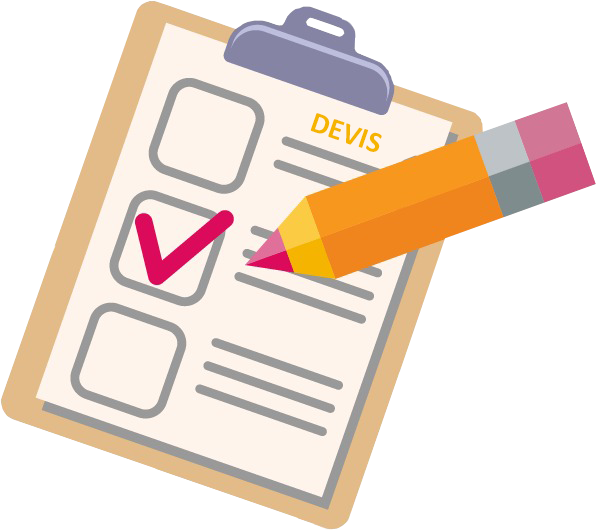
<style>
.page{position:relative;width:597px;height:530px;background:#ffffff}
.page>*{position:absolute;margin:0}
.t1{font:30px "Calibri-Bold";color:#f5b400}
</style>
<div class="page">
<p class="t1" style="left:310px;top:113px;width:72px;height:39px;rotate:19deg">DEVIS</p>
</div>
